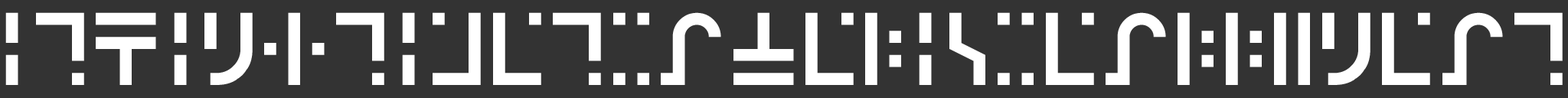
<style>
.page{position:relative;width:1568px;height:98px;background:#333333}
.page>*{position:absolute;margin:0}
.t1{font:60.1px "Galactic-Simple";color:#ffffff}
</style>
<div class="page">
<p class="t1" style="left:5px;top:12px;width:1558px;height:73px">ithinktimetravelisreallyneat</p>
</div>
